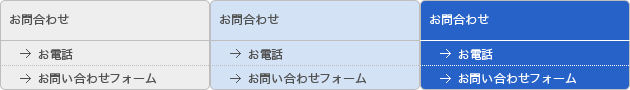
<style>
.page{position:relative;width:630px;height:90px;background:#d3e2f4}
.page>*{position:absolute;margin:0}
.t1{font:12px "HiraKakuPro-W3";color:#515151}
.t2{font:12px "HiraKakuPro-W3";color:#ffffff}
</style>
<div class="page">
<p class="t1" style="left:10px;top:14px;width:59px;height:11px">お問合わせ</p>
<p class="t1" style="left:220px;top:14px;width:59px;height:11px">お問合わせ</p>
<p class="t2" style="left:430px;top:14px;width:59px;height:11px">お問合わせ</p>
<p class="t1" style="left:38px;top:48px;width:35px;height:12px">お電話</p>
<p class="t1" style="left:248px;top:48px;width:35px;height:12px">お電話</p>
<p class="t2" style="left:458px;top:48px;width:35px;height:12px">お電話</p>
<p class="t1" style="left:38px;top:73px;width:119px;height:11px">お問い合わせフォーム</p>
<p class="t1" style="left:248px;top:73px;width:119px;height:11px">お問い合わせフォーム</p>
<p class="t2" style="left:458px;top:73px;width:119px;height:11px">お問い合わせフォーム</p>
</div>
